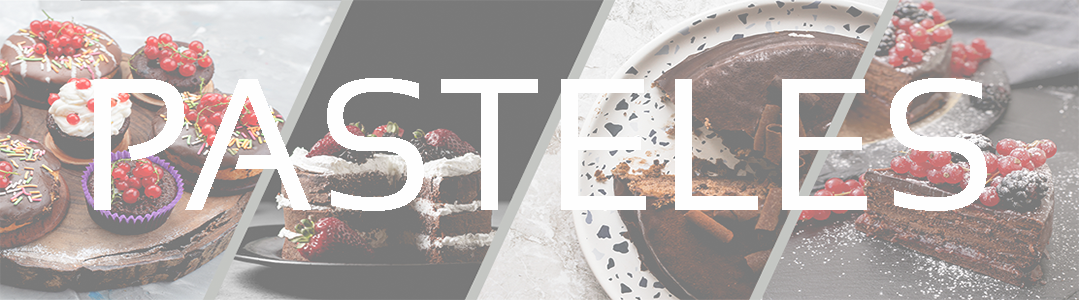
<style>
.page{position:relative;width:1079px;height:300px}
.page>*{position:absolute;margin:0}
.t1{font:187.8px "Sansation-Regular";letter-spacing:0.025em;color:#fefefe;scale:0.97 1}
</style>
<div class="page">
<p class="t1" style="left:94px;top:78px;width:893px;height:133px">PASTELES</p>
</div>
